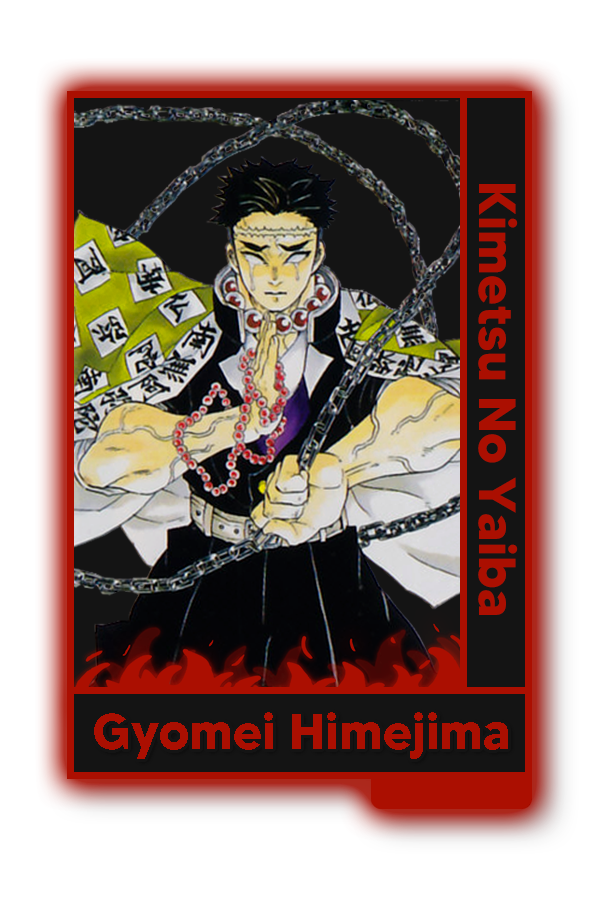
<style>
.page{position:relative;width:600px;height:900px;background:#ffffff}
.page>*{position:absolute;margin:0}
.t1{font:52px "MADETOMMY-Bold";color:#ab0f01}
.t2{font:50.5px "MADETOMMY-Bold";color:#ab0f01}
</style>
<div class="page">
<p class="t1" style="left:478px;top:184px;width:40px;height:431px;rotate:90deg">Kimetsu No Yaiba</p>
<p class="t2" style="left:94px;top:712px;width:414px;height:47px">Gyomei Himejima</p>
</div>
